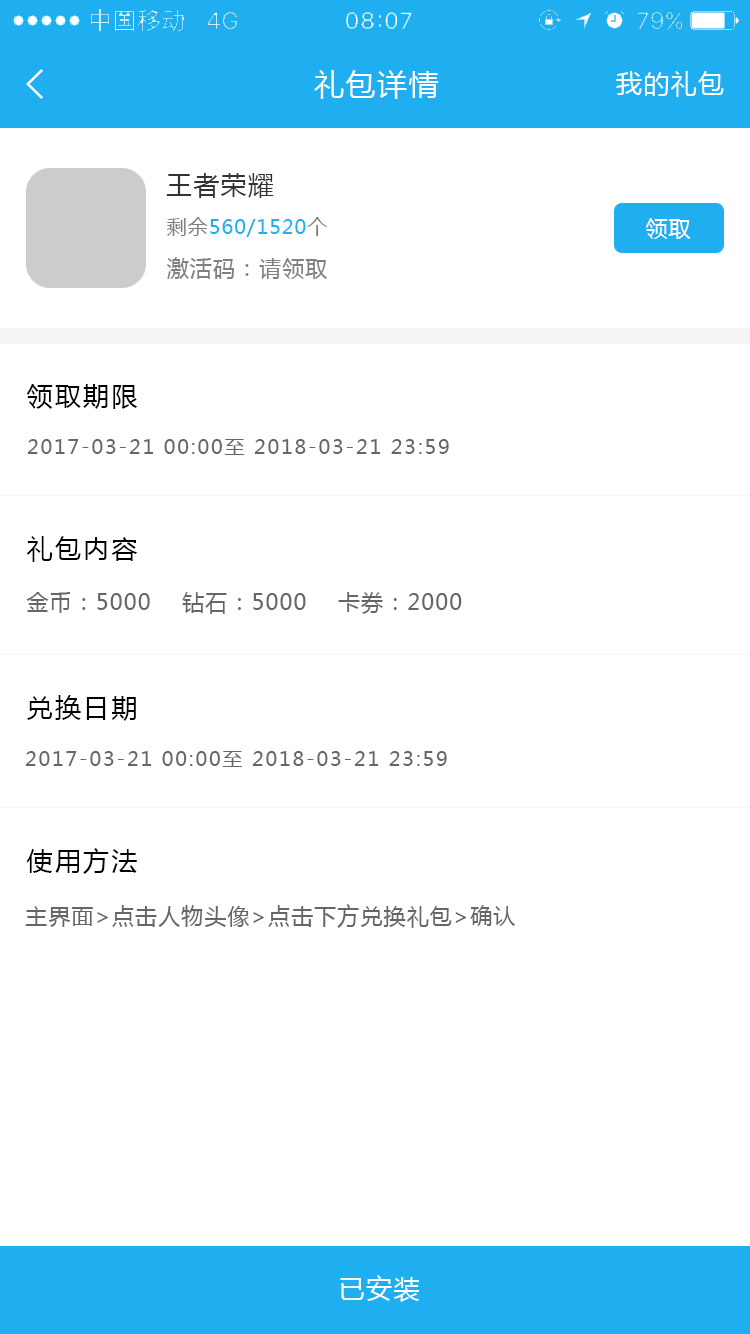
<style>
.page{position:relative;width:750px;height:1334px;background:#ffffff}
.page>*{position:absolute;margin:0}
.t1{font:30px "MicrosoftYaHei";letter-spacing:0.05em;color:#ffffff}
.t2{font:26px "MicrosoftYaHei";letter-spacing:0.05em;color:#ffffff}
.t3{font:26px "MicrosoftYaHei";letter-spacing:0.05em;color:#333333}
.t4{font:20px "MicrosoftYaHei";letter-spacing:0.05em;color:#1faff0}
.t5{font:20px "MicrosoftYaHei";letter-spacing:0.05em;color:#808080}
.t6{font:22px "MicrosoftYaHei";letter-spacing:0.05em;color:#ffffff}
.t7{font:22px "MicrosoftYaHei";letter-spacing:0.05em;color:#808080}
.t8{font:26px "MicrosoftYaHei";letter-spacing:0.09em;color:#000000}
.t9{font:20px "MicrosoftYaHei";letter-spacing:0.09em;color:#666666}
.t10{font:22px "MicrosoftYaHei";letter-spacing:0.05em;color:#666666}
</style>
<div class="page">
<p class="t1" style="left:314px;top:70px;width:125px;height:29px">礼包详情</p>
<p class="t2" style="left:616px;top:71px;width:108px;height:26px">我的礼包</p>
<p class="t3" style="left:166px;top:173px;width:108px;height:25px">王者荣耀</p>
<p class="t4" style="left:167px;top:217px;width:160px;height:20px"><span class="t5">剩余</span>560/1520<span class="t5">个</span></p>
<p class="t6" style="left:645px;top:218px;width:46px;height:21px">领取</p>
<p class="t7" style="left:167px;top:257px;width:160px;height:22px">激活码：请领取</p>
<p class="t8" style="left:26px;top:384px;width:112px;height:25px">领取期限</p>
<p class="t9" style="left:27px;top:439px;width:422px;height:16px">2017-03-21 00:00至 2018-03-21 23:59</p>
<p class="t8" style="left:27px;top:536px;width:111px;height:26px">礼包内容</p>
<p class="t10" style="left:26px;top:592px;width:436px;height:22px">金币：5000    钻石：5000    卡券：2000</p>
<p class="t8" style="left:27px;top:695px;width:109px;height:26px">兑换日期</p>
<p class="t9" style="left:25px;top:751px;width:422px;height:16px">2017-03-21 00:00至 2018-03-21 23:59</p>
<p class="t8" style="left:26px;top:848px;width:111px;height:26px">使用方法</p>
<p class="t10" style="left:25px;top:904px;width:490px;height:24px">主界面&gt;点击人物头像&gt;点击下方兑换礼包&gt;确认</p>
<p class="t2" style="left:340px;top:1275px;width:80px;height:27px">已安装</p>
</div>
